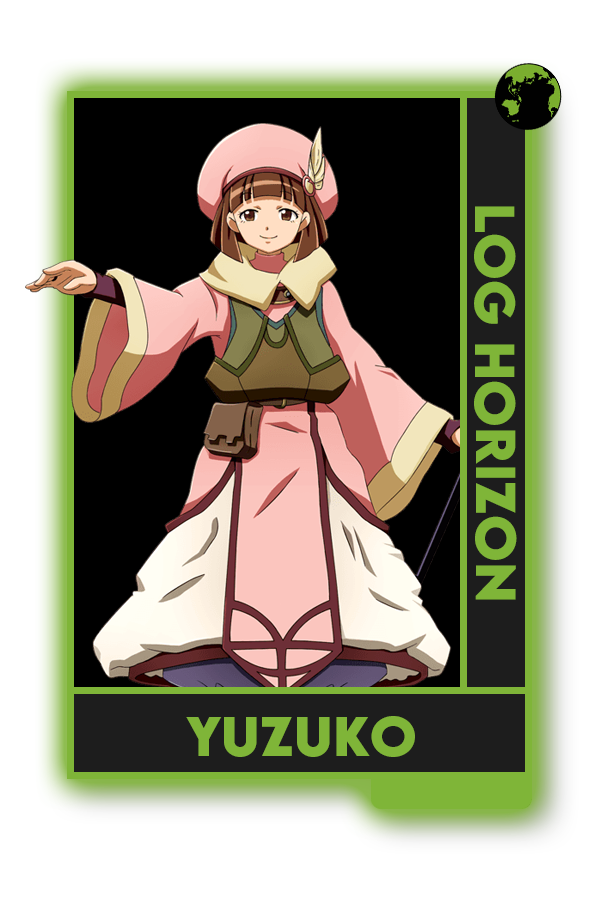
<style>
.page{position:relative;width:600px;height:900px;background:#ffffff}
.page>*{position:absolute;margin:0}
.t1{font:50px "LEMONMILK-Bold";color:#7fad41}
</style>
<div class="page">
<p class="t1" style="left:474px;top:206px;width:43px;height:394px;rotate:90deg">Log Horizon</p>
<p class="t1" style="left:186px;top:716px;width:229px;height:41px">Yuzuko</p>
</div>
